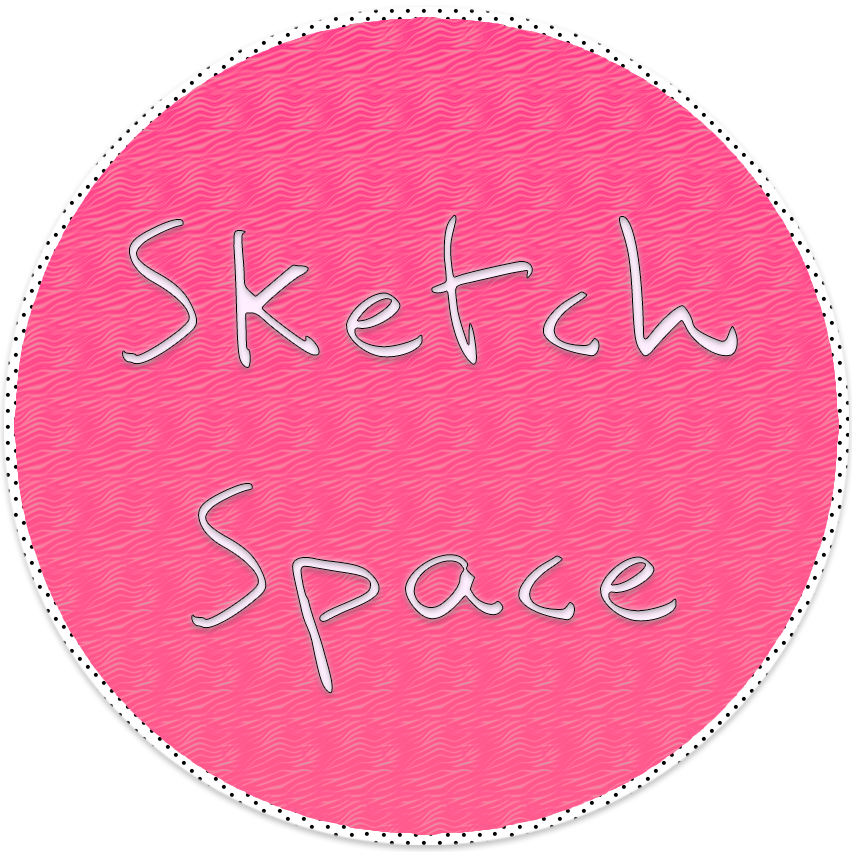
<style>
.page{position:relative;width:852px;height:852px;background:#ffffff}
.page>*{position:absolute;margin:0}
.t1{font:220px "Comili-Book"}
</style>
<div class="page">
<p class="t1" style="left:122px;top:215px;width:616px;height:479px;text-align:center">Sketch<br>Space</p>
</div>
